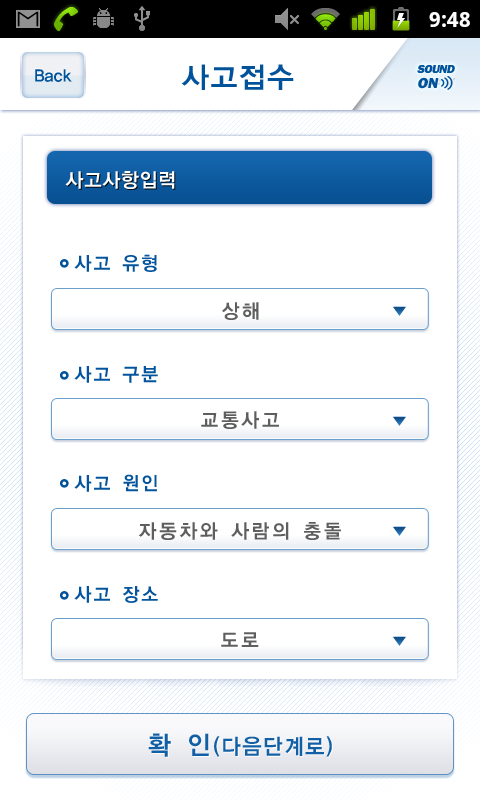
<style>
.page{position:relative;width:480px;height:800px;background:#ffffff}
.page>*{position:absolute;margin:0}
.t1{font:29px "YDIYGO140-KSCpc-EUC-H";letter-spacing:-0.025em;color:#00529b}
.t2{font:12px/15px "FranklinGothic-Heavy";letter-spacing:-0.05em;color:#00529b;text-transform:uppercase;font-style:italic}
.t3{font:13px/15px "FranklinGothic-Heavy";color:#00529b;text-transform:uppercase;font-style:italic}
.t4{font:15px/15px "FranklinGothic-Heavy";color:#00529b;text-transform:uppercase;font-style:italic}
.t5{font:18px "YDIYGO140-KSCpc-EUC-H";letter-spacing:-0.075em;color:#00529b;scale:0.95 1}
.t6{font:20px "YDIYGO140-KSCpc-EUC-H";letter-spacing:-0.025em;color:#ffffff;scale:0.95 1}
.t7{font:19px "YDIYGO140-KSCpc-EUC-H";letter-spacing:0.05em;color:#00529b;scale:0.95 1}
.t8{font:20px "YDIYGO140-KSCpc-EUC-H";letter-spacing:0.075em;color:#5c5c5c;scale:0.95 1}
.t9{font:22px "YDIYGO140-KSCpc-EUC-H";color:#115fa5;scale:0.95 1}
.t10{font:26px "YDIYGO140-KSCpc-EUC-H";letter-spacing:0.05em;color:#115fa5;scale:0.95 1}
</style>
<div class="page">
<p class="t1" style="left:181px;top:64px;width:113px;height:26px">사고접수</p>
<p class="t2" style="left:417px;top:65px;width:38px;height:24px">sound<br><span class="t3">oFF</span></p>
<p class="t2" style="left:417px;top:65px;width:38px;height:24px">sound<br><span class="t4">on</span></p>
<p class="t5" style="left:35px;top:69px;width:37px;height:13px">Back</p>
<p class="t6" style="left:65px;top:171px;width:110px;height:18px">사고사항입력</p>
<p class="t7" style="left:74px;top:254px;width:83px;height:18px">사고 유형</p>
<p class="t8" style="left:222px;top:302px;width:37px;height:18px">상해</p>
<p class="t7" style="left:74px;top:366px;width:84px;height:17px">사고 구분</p>
<p class="t8" style="left:201px;top:411px;width:78px;height:18px">교통사고</p>
<p class="t7" style="left:74px;top:474px;width:83px;height:18px">사고 원인</p>
<p class="t8" style="left:138px;top:522px;width:203px;height:18px">자동차와 사람의 충돌</p>
<p class="t7" style="left:74px;top:586px;width:84px;height:17px">사고 장소</p>
<p class="t8" style="left:221px;top:632px;width:38px;height:15px">도로</p>
<p class="t9" style="left:148px;top:733px;width:184px;height:24px"><span class="t10">확 인</span>(다음단계로)</p>
</div>
